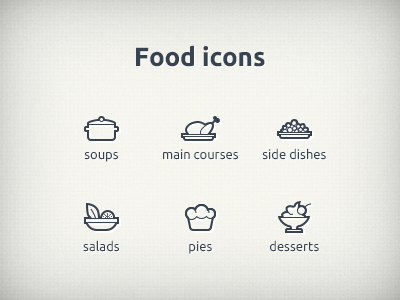
<style>
.page{position:relative;width:400px;height:300px}
.page>*{position:absolute;margin:0}
.t1{font:26.3px "Ubuntu-Bold";color:#384351}
.t2{font:13.1px "Ubuntu";color:#384351}
</style>
<div class="page">
<p class="t1" style="left:136px;top:45px;width:129px;height:22px">Food icons</p>
<p class="t2" style="left:163px;top:149px;width:75px;height:11px">main courses</p>
<p class="t2" style="left:262px;top:148px;width:64px;height:12px">side dishes</p>
<p class="t2" style="left:84px;top:152px;width:34px;height:10px">soups</p>
<p class="t2" style="left:83px;top:240px;width:36px;height:12px">salads</p>
<p class="t2" style="left:189px;top:241px;width:23px;height:13px">pies</p>
<p class="t2" style="left:270px;top:240px;width:49px;height:12px">desserts</p>
</div>
